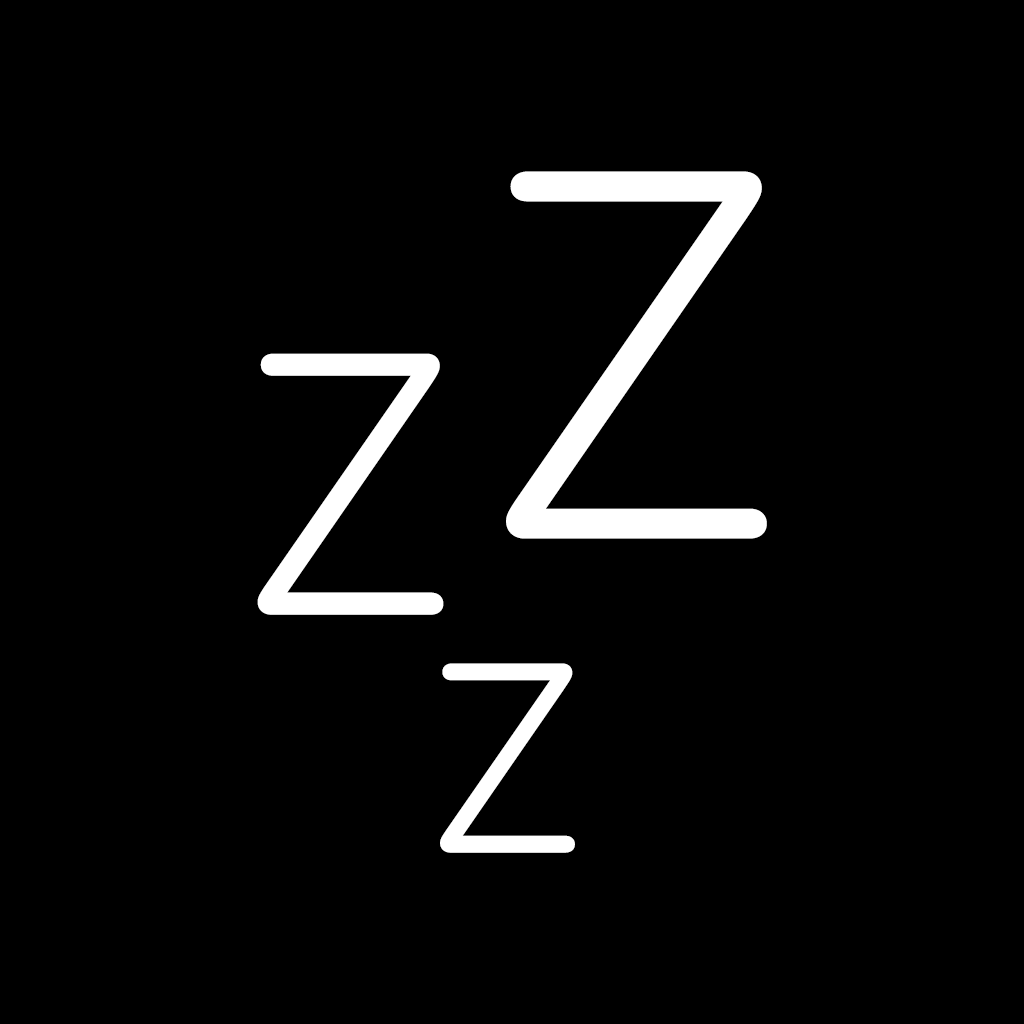
<style>
.page{position:relative;width:1024px;height:1024px;background:#000000}
.page>*{position:absolute;margin:0}
.t1{font:547.1px "SFCompactRounded-Thin";color:#ffffff;font-weight:bold}
.t2{font:387.8px "SFCompactRounded-Thin";color:#ffffff;font-weight:bold}
.t3{font:279.6px "SFCompactRounded-Thin";color:#ffffff;font-weight:bold}
</style>
<div class="page">
<p class="t1" style="left:506px;top:171px;width:261px;height:368px">Z</p>
<p class="t2" style="left:257px;top:353px;width:187px;height:262px">Z</p>
<p class="t3" style="left:440px;top:663px;width:135px;height:190px">Z</p>
</div>
